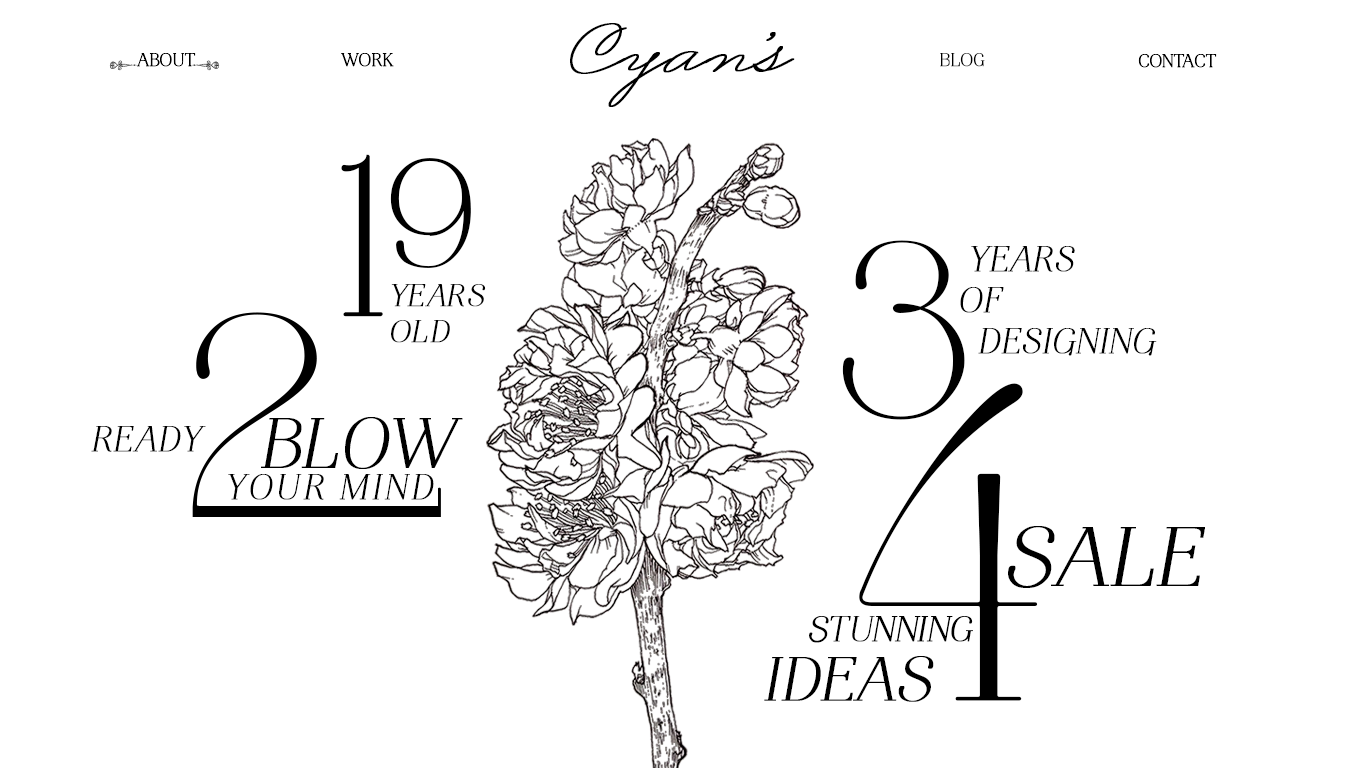
<style>
.page{position:relative;width:1366px;height:768px;background:#ffffff}
.page>*{position:absolute;margin:0}
.t1{font:68.4px "BusinessPenmanship";color:#000000;font-weight:bold}
.t2{font:18px "AirePro-Roman";color:#000000;font-weight:bold}
.t3{font:20px "Chalk-Hand-Elements";text-transform:uppercase}
.t4{font:224.6px "AirePro-Roman";color:#000000;font-weight:bold}
.t5{font:150.5px "AirePro-Roman";color:#000000;font-weight:bold}
.t6{font:243.9px "AirePro-Roman";color:#000000;text-transform:uppercase;font-weight:bold}
.t7{font:35px "AirePro-RomanItalic";letter-spacing:0.025em;color:#000000;text-transform:uppercase;font-weight:bold}
.t8{font:30.7px "AirePro-RomanItalic";letter-spacing:0.042em;color:#000000;text-transform:uppercase;font-weight:bold}
.t9{font:450.1px "AirePro-Roman";letter-spacing:0.042em;color:#000000;text-transform:uppercase;font-weight:bold}
.t10{font:70px "AirePro-RomanItalic";color:#000000;text-transform:uppercase;font-weight:bold}
.t11{font:35px "AirePro-RomanItalic";letter-spacing:0.042em;color:#000000;text-transform:uppercase;font-weight:bold}
.t12{font:35px "AirePro-RomanItalic";letter-spacing:0.1em;color:#000000;text-transform:uppercase;font-weight:bold}
.t13{font:83.8px "AirePro-Roman";color:#000000;text-transform:uppercase;font-weight:bold;font-style:italic}
.t14{font:35px "AirePro-Roman";color:#000000;text-transform:uppercase;font-weight:bold;font-style:italic}
.t15{font:62px "AirePro-Roman";color:#000000;text-transform:uppercase;font-weight:bold;font-style:italic}
</style>
<div class="page">
<p class="t1" style="left:570px;top:23px;width:225px;height:84px">Cyan’s</p>
<p class="t2" style="left:137px;top:53px;width:59px;height:14px">ABOUT</p>
<p class="t2" style="left:341px;top:53px;width:53px;height:14px">WORK</p>
<p class="t2" style="left:940px;top:53px;width:45px;height:14px">BLOG</p>
<p class="t2" style="left:1138px;top:54px;width:79px;height:14px">CONTACT</p>
<p class="t3" style="left:109px;top:60px;width:111px;height:11px">u    t</p>
<p class="t4" style="left:341px;top:154px;width:42px;height:163px">1</p>
<p class="t5" style="left:390px;top:158px;width:81px;height:110px">9</p>
<p class="t6" style="left:842px;top:240px;width:123px;height:180px">3</p>
<p class="t7" style="left:960px;top:246px;width:197px;height:110px">years <br>of<br>  designing</p>
<p class="t8" style="left:391px;top:284px;width:95px;height:59px">years <br>old</p>
<p class="t9" style="left:859px;top:383px;width:179px;height:318px">4</p>
<p class="t10" style="left:261px;top:417px;width:202px;height:52px">BLOW</p>
<p class="t11" style="left:91px;top:426px;width:115px;height:26px">READY -</p>
<p class="t12" style="left:228px;top:474px;width:206px;height:26px">YOUR MIND</p>
<p class="t13" style="left:1008px;top:526px;width:197px;height:62px">SALE</p>
<p class="t14" style="left:809px;top:616px;width:164px;height:27px">STUNNING</p>
<p class="t15" style="left:764px;top:656px;width:170px;height:46px">IDEAS</p>
</div>
